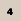
<style>
.page{position:relative;width:21px;height:21px;background:#d9cdc1}
.page>*{position:absolute;margin:0}
.t1{font:9px "Tahoma-Bold";color:#000000}
</style>
<div class="page">
<p class="t1" style="left:7px;top:8px;width:6px;height:7px">4</p>
</div>
